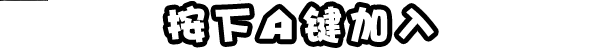
<style>
.page{position:relative;width:608px;height:48px;background:#ffffff}
.page>*{position:absolute;margin:0}
.t1{font:40.7px "DFPHaiBaoW12";letter-spacing:0.15em;color:#ffffff}
.t2{font:56px "MarioKartPositionFontRegular";letter-spacing:0.15em;color:#ffffff}
</style>
<div class="page">
<p class="t1" style="left:167px;top:5px;width:267px;height:38px">按下<span class="t2">A</span>键加入</p>
</div>
